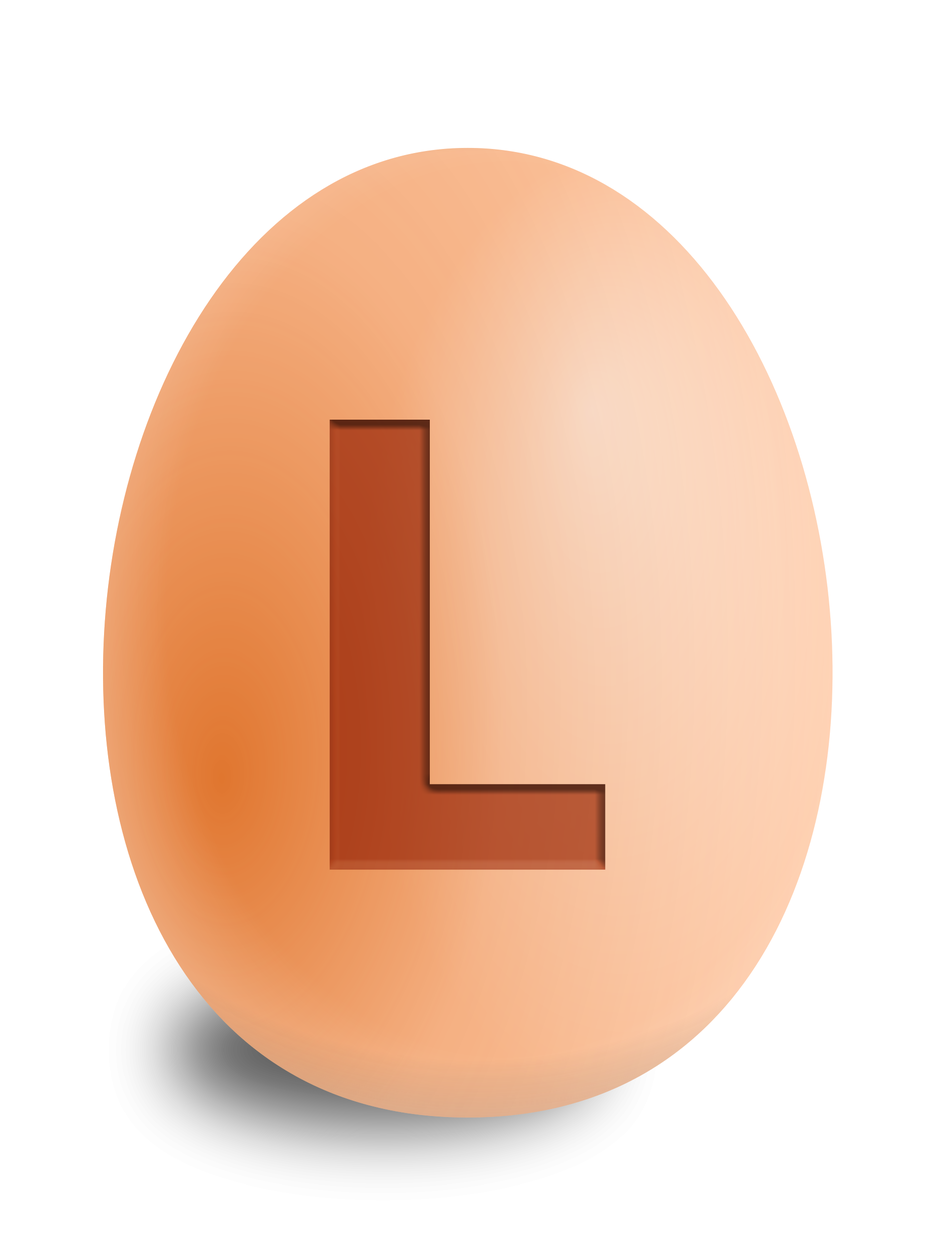
<style>
.page{position:relative;width:947px;height:1260px;background:#ffffff}
.page>*{position:absolute;margin:0}
.t1{font:667.4px "MyriadPro-Bold";color:#b14823}
</style>
<div class="page">
<p class="t1" style="left:329px;top:420px;width:276px;height:450px">L</p>
</div>
